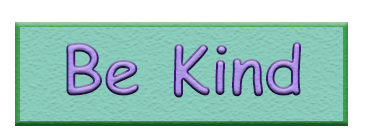
<style>
.page{position:relative;width:367px;height:139px;background:#ffffff}
.page>*{position:absolute;margin:0}
.t1{font:66.7px "ComicSansMS-Bold"}
</style>
<div class="page">
<p class="t1" style="left:66px;top:42px;width:235px;height:56px">Be Kind</p>
</div>
